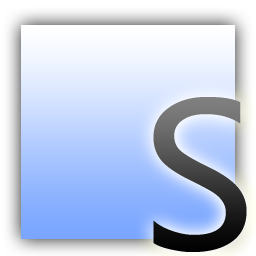
<style>
.page{position:relative;width:256px;height:256px}
.page>*{position:absolute;margin:0}
.t1{font:200px "MicrosoftYaHeiUI"}
</style>
<div class="page">
<p class="t1" style="left:153px;top:97px;width:94px;height:155px">S</p>
</div>
